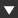
<style>
.page{position:relative;width:18px;height:18px;background:#333333}
.page>*{position:absolute;margin:0}
.t1{font:12px "Seoul-Headline";color:#ffffff}
</style>
<div class="page">
<p class="t1" style="left:3px;top:6px;width:12px;height:9px">▼</p>
</div>
